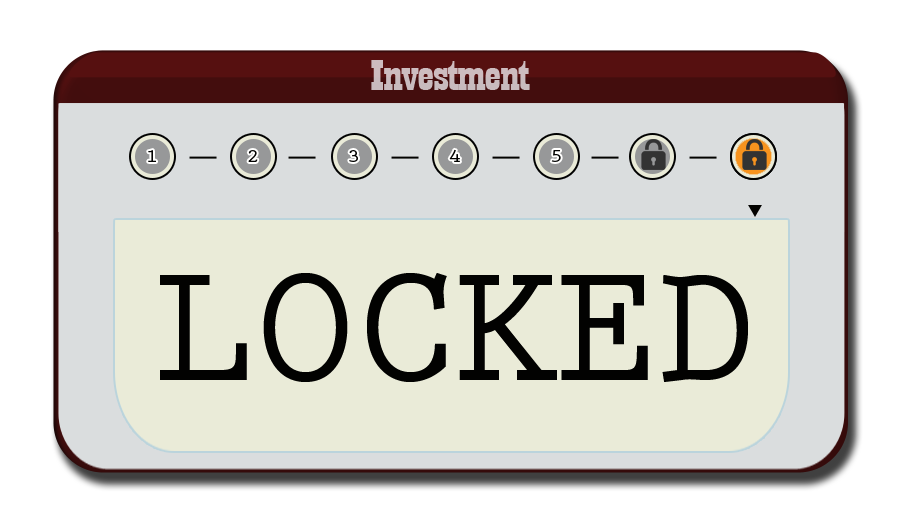
<style>
.page{position:relative;width:910px;height:512px;background:#eaebd8}
.page>*{position:absolute;margin:0}
.t1{font:44.6px "Playbill";letter-spacing:-0.025em;color:#c8bbbe;scale:1.61 1}
.t2{font:18.8px "PrestigeEliteStd-Bd";letter-spacing:-0.025em;color:#020201;scale:1.18 1}
.t3{font:175px "PrestigeEliteStd-Bd";letter-spacing:-0.025em;color:#020201}
</style>
<div class="page">
<p class="t1" style="left:371px;top:60px;width:159px;height:30px">Investment</p>
<p class="t2" style="left:148px;top:150px;width:8px;height:12px">1</p>
<p class="t2" style="left:248px;top:150px;width:10px;height:12px">2</p>
<p class="t2" style="left:349px;top:150px;width:9px;height:12px">3</p>
<p class="t2" style="left:449px;top:149px;width:11px;height:13px">4</p>
<p class="t2" style="left:551px;top:150px;width:10px;height:12px">5</p>
<p class="t3" style="left:160px;top:273px;width:588px;height:109px">LOCKED</p>
</div>
